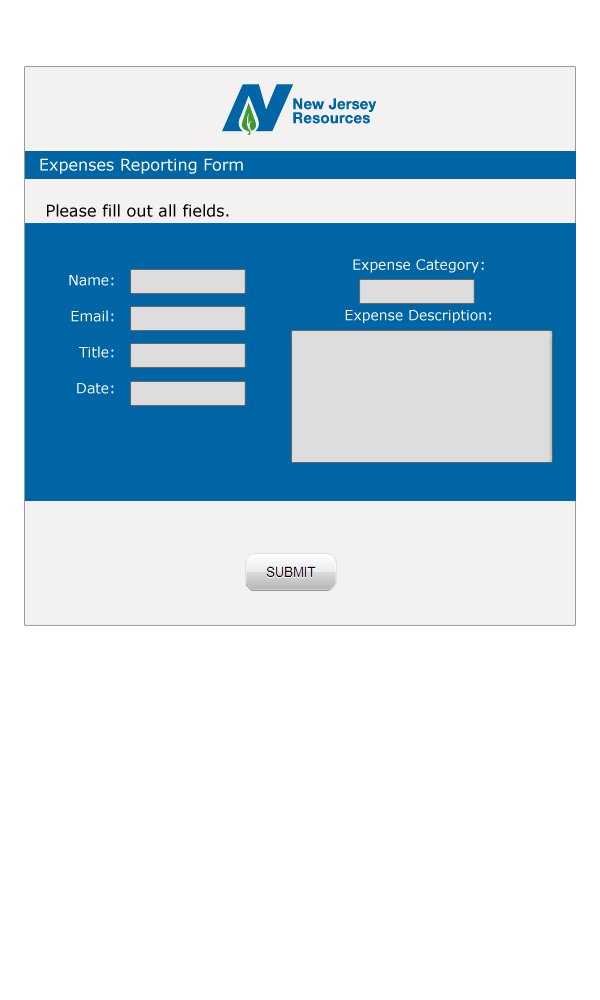
<style>
.page{position:relative;width:600px;height:1000px;background:#ffffff}
.page>*{position:absolute;margin:0}
.t1{font:16px "Verdana";color:#ffffff}
.t2{font:16px "Verdana";color:#000000}
.t3{font:14px "Verdana";color:#ffffff}
.t4{font:14px/18px "Verdana";color:#ffffff}
</style>
<div class="page">
<p class="t1" style="left:40px;top:158px;width:203px;height:16px">Expenses Reporting Form</p>
<p class="t2" style="left:47px;top:204px;width:182px;height:13px">Please fill out all fields.</p>
<p class="t3" style="left:345px;top:259px;width:146px;height:64px;text-align:center">Expense Category:<br><br><br>Expense Description:</p>
<p class="t4" style="left:69px;top:275px;width:45px;height:119px;text-align:right">Name:<br><br>Email:<br><br>Title:<br><br>Date:</p>
</div>
